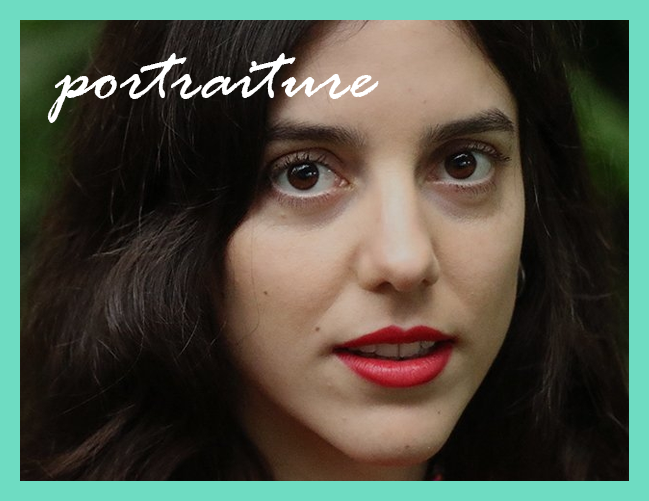
<style>
.page{position:relative;width:649px;height:501px}
.page>*{position:absolute;margin:0}
.t1{font:80px "RageItalic";color:#ffffff}
</style>
<div class="page">
<p class="t1" style="left:47px;top:53px;width:332px;height:70px">portraiture</p>
</div>
